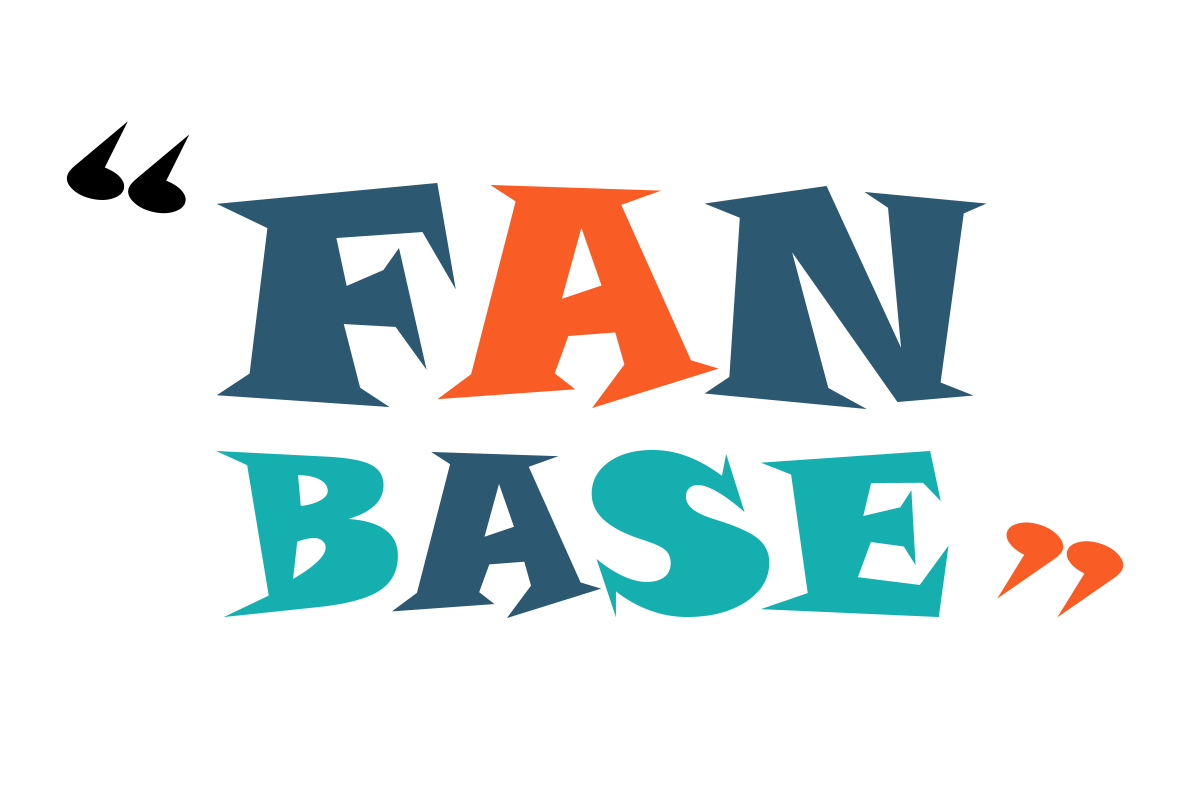
<style>
.page{position:relative;width:1200px;height:800px;background:#ffffff}
.page>*{position:absolute;margin:0}
.t1{font:221px "SnapITC-Regular";color:#000000}
.t2{font:297px "SnapITC-Regular";color:#2c5871}
.t3{font:297px "SnapITC-Regular";color:#f95c24}
.t4{font:221px "SnapITC-Regular";color:#16afb0}
.t5{font:221px "SnapITC-Regular";color:#2c5871}
.t6{font:221px "SnapITC-Regular";color:#f95c24}
</style>
<div class="page">
<p class="t1" style="left:66px;top:121px;width:124px;height:93px;rotate:12deg">“</p>
<p class="t2" style="left:216px;top:183px;width:771px;height:226px">F<span class="t3">A</span>N</p>
<p class="t4" style="left:216px;top:450px;width:733px;height:168px">B<span class="t5">A</span>SE</p>
<p class="t6" style="left:997px;top:522px;width:127px;height:96px;rotate:-163deg">“</p>
</div>
